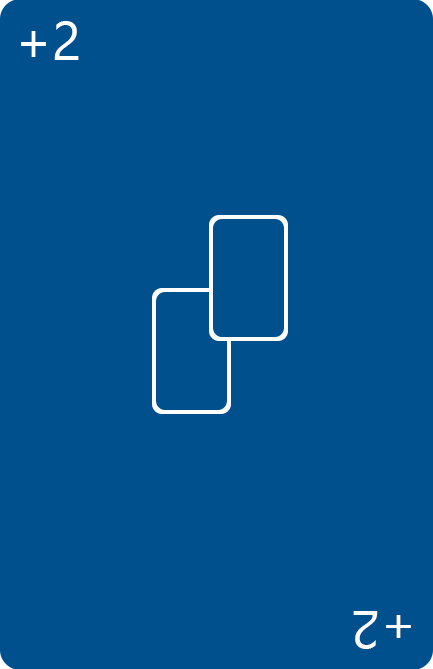
<style>
.page{position:relative;width:433px;height:669px;background:#00508d}
.page>*{position:absolute;margin:0}
.t1{font:53.9px "NirmalaUI";color:#ffffff}
.t2{font:53.5px "NirmalaUI";color:#ffffff}
</style>
<div class="page">
<p class="t1" style="left:21px;top:21px;width:58px;height:39px">+2</p>
<p class="t2" style="left:353px;top:611px;width:58px;height:38px;rotate:180deg">+2</p>
</div>
